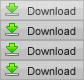
<style>
.page{position:relative;width:84px;height:80px;background:#bfbfbf}
.page>*{position:absolute;margin:0}
.t1{font:11px "ArialMT";color:#444444}
.t2{font:11px "ArialMT";color:#222222}
</style>
<div class="page">
<p class="t1" style="left:28px;top:7px;width:48px;height:8px">Download</p>
<p class="t2" style="left:28px;top:27px;width:48px;height:8px">Download</p>
<p class="t2" style="left:28px;top:47px;width:48px;height:8px">Download</p>
<p class="t2" style="left:28px;top:67px;width:48px;height:8px">Download</p>
</div>
